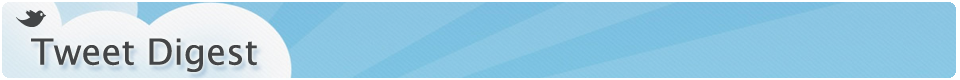
<style>
.page{position:relative;width:960px;height:80px}
.page>*{position:absolute;margin:0}
.t1{font:36px "LucidaGrande";color:#434547}
</style>
<div class="page">
<p class="t1" style="left:31px;top:38px;width:226px;height:34px">Tweet Digest</p>
</div>
